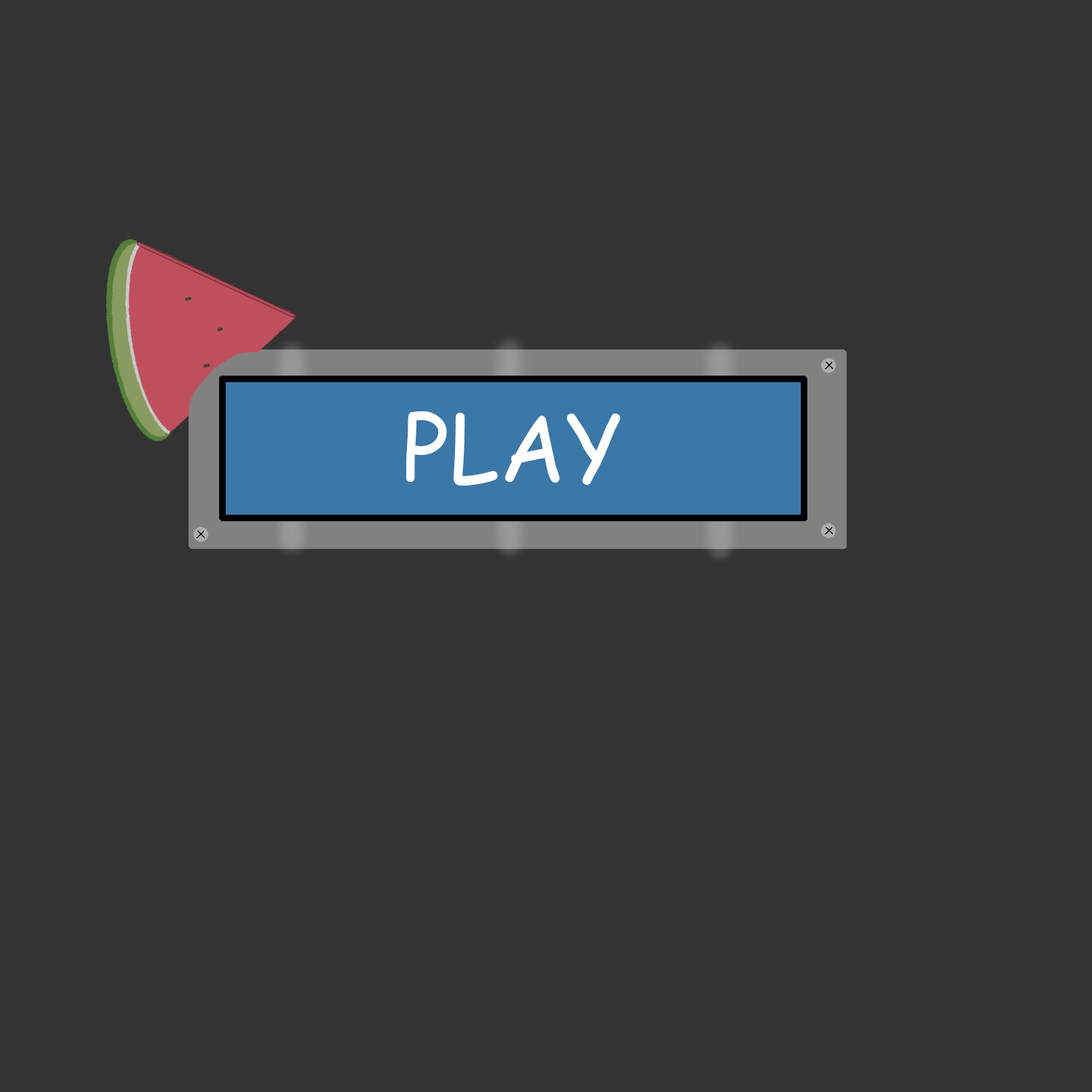
<style>
.page{position:relative;width:1092px;height:1092px;background:#333333}
.page>*{position:absolute;margin:0}
.t1{font:91px "ComicSansMS";color:#ffffff}
</style>
<div class="page">
<p class="t1" style="left:406px;top:411px;width:214px;height:75px">PLAY</p>
</div>
